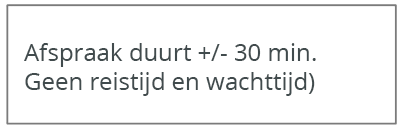
<style>
.page{position:relative;width:402px;height:129px;background:#ffffff}
.page>*{position:absolute;margin:0}
.t1{font:24px "OpenSans";color:#414b4d}
</style>
<div class="page">
<p class="t1" style="left:24px;top:43px;width:292px;height:53px">Afspraak duurt +/- 30 min. <br>Geen reistijd en wachttijd)</p>
</div>
